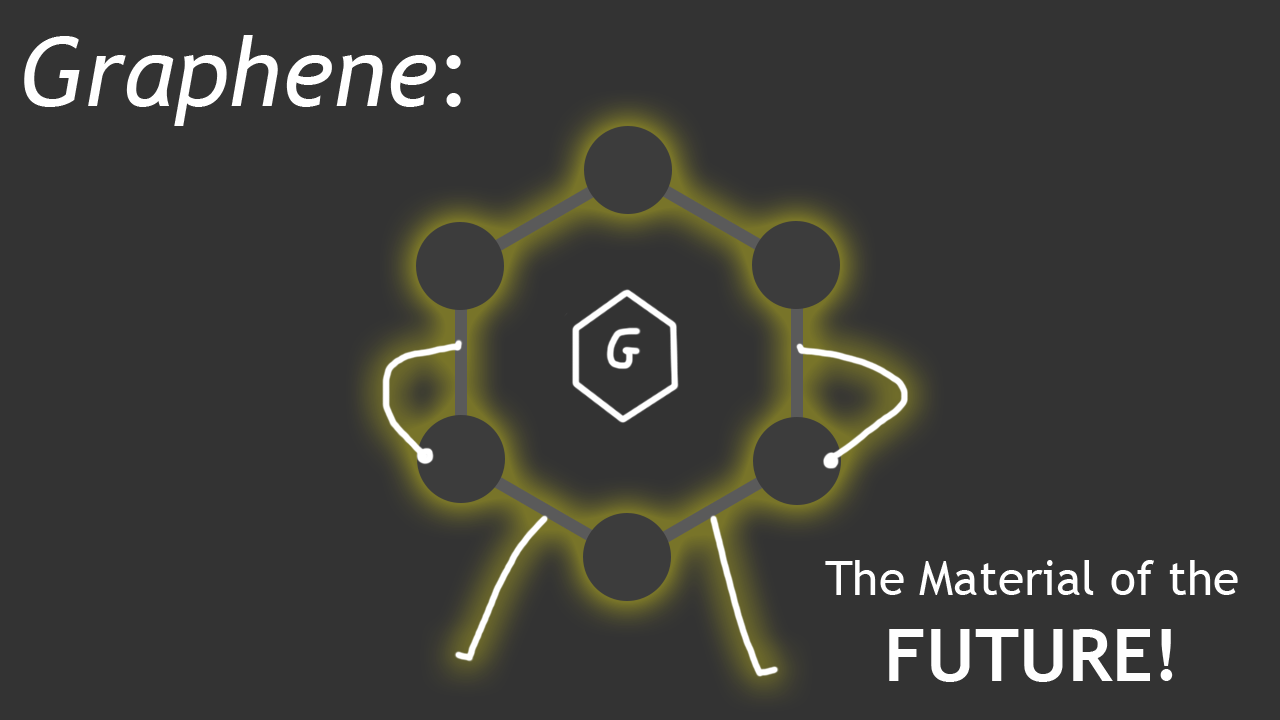
<style>
.page{position:relative;width:1280px;height:720px;background:#333333}
.page>*{position:absolute;margin:0}
.t1{font:96px "TrebuchetMS-Italic";color:#ffffff}
.t2{font:96px "TrebuchetMS";color:#ffffff}
.t3{font:48px "TrebuchetMS";color:#ffffff}
.t4{font:72px "TrebuchetMS-Bold";color:#ffffff}
</style>
<div class="page">
<p class="t1" style="left:24px;top:35px;width:437px;height:91px">Graphene<span class="t2">:</span></p>
<p class="t3" style="left:825px;top:560px;width:413px;height:122px;text-align:center">The Material of the<br><span class="t4">FUTURE!</span></p>
</div>
